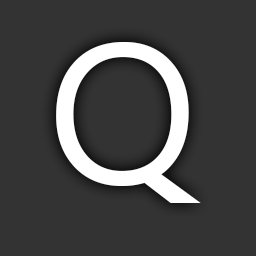
<style>
.page{position:relative;width:256px;height:256px;background:#333333}
.page>*{position:absolute;margin:0}
.t1{font:200px "SegoeUI";color:#ffffff}
</style>
<div class="page">
<p class="t1" style="left:56px;top:42px;width:145px;height:161px">Q</p>
</div>
